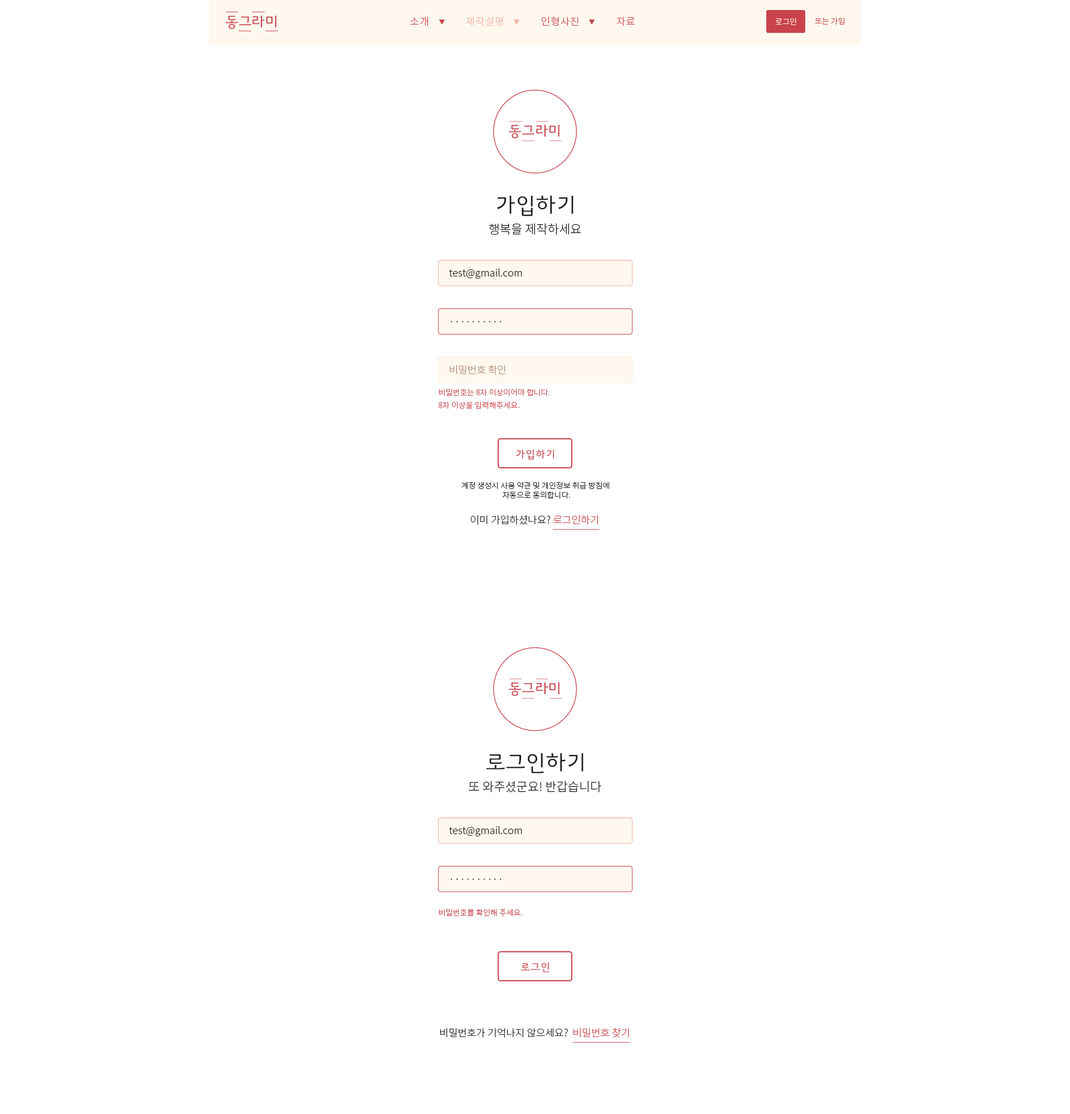
<style>
.page{position:relative;width:1070px;height:1114px;background:#ffffff}
.page>*{position:absolute;margin:0}
.t1{font:10px "NotoSansKR-Light";letter-spacing:0.05em;color:#ca434b}
.t2{font:10px "NotoSansKR-Light";letter-spacing:0.05em;color:#f5b1a2}
.t3{font:7.8px "NotoSansKR-Light";color:#fff8ee}
.t4{font:7.8px "NotoSansKR-Light";color:#ca434b}
.t5{font:21.2px "BinggraeTaom";color:#1e1b19}
.t6{font:12.3px "NotoSansKR-Light";color:#1e1b19}
.t7{font:10px "NotoSansKR-Light";color:#1e1b19}
.t8{font:10px "NotoSansKR-Light";color:#ae8b79}
.t9{font:7.8px/24.5px "NotoSansKR-Light";color:#ca434b}
.t10{font:7.8px/12.8px "NotoSansKR-Light";color:#ca434b}
.t11{font:10px "BinggraeTaom";letter-spacing:0.05em;color:#ca434b}
.t12{font:7.8px "NotoSansKR-Light";color:#1e1b19}
.t13{font:10px "NotoSansKR-Light";color:#ca434b;text-decoration:underline}
</style>
<div class="page">
<p class="t1" style="left:410px;top:16px;width:18px;height:10px">소개</p>
<p class="t2" style="left:466px;top:16px;width:37px;height:10px">제작설명</p>
<p class="t1" style="left:541px;top:16px;width:38px;height:10px">인형사진</p>
<p class="t1" style="left:617px;top:17px;width:18px;height:9px">자료</p>
<p class="t3" style="left:776px;top:18px;width:21px;height:7px">로그인</p>
<p class="t4" style="left:815px;top:17px;width:30px;height:8px">또는 가입</p>
<p class="t5" style="left:497px;top:195px;width:77px;height:21px">가입하기</p>
<p class="t6" style="left:489px;top:223px;width:93px;height:12px">행복을 제작하세요</p>
<p class="t7" style="left:449px;top:268px;width:73px;height:11px">test@gmail.com</p>
<p class="t7" style="left:451px;top:321px;width:51px;height:1px">··········</p>
<p class="t8" style="left:450px;top:365px;width:56px;height:10px">비밀번호 확인</p>
<p class="t9" style="left:439px;top:389px;width:111px;height:20px">비밀번호는 8자 이상이어야 합니다.<span class="t10"><br>8자 이상을 입력해주세요.</span></p>
<p class="t11" style="left:516px;top:449px;width:38px;height:11px">가입하기</p>
<p class="t12" style="left:462px;top:482px;width:147px;height:17px;text-align:center">계정 생성시 사용 약관 및 개인정보 취급 방침에 <br>자동으로 동의합니다.</p>
<p class="t7" style="left:471px;top:515px;width:129px;height:15px">이미 가입하셨나요? <span class="t13">로그인하기</span></p>
<p class="t5" style="left:486px;top:753px;width:98px;height:20px">로그인하기</p>
<p class="t6" style="left:469px;top:781px;width:133px;height:11px">또 와주셨군요! 반갑습니다</p>
<p class="t7" style="left:449px;top:826px;width:73px;height:10px">test@gmail.com</p>
<p class="t7" style="left:451px;top:878px;width:51px;height:2px">··········</p>
<p class="t4" style="left:439px;top:909px;width:83px;height:8px">비밀번호를 확인해 주세요.</p>
<p class="t11" style="left:521px;top:962px;width:29px;height:10px">로그인</p>
<p class="t7" style="left:440px;top:1028px;width:191px;height:15px">비밀번호가 기억나지 않으세요?  <span class="t13">비밀번호 찾기</span></p>
</div>
